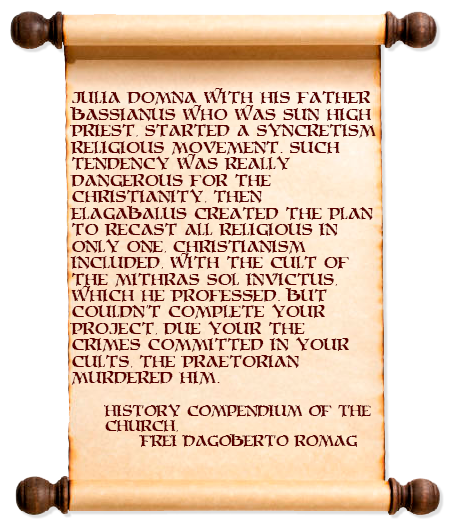
<style>
.page{position:relative;width:451px;height:526px;background:#ffffff}
.page>*{position:absolute;margin:0}
.t1{font:13.7px "MoriaCitadel";color:#580000}
.t2{font:12.5px "MoriaCitadel";color:#580000}
</style>
<div class="page">
<p class="t1" style="left:70px;top:88px;width:306px;height:297px">Julia Domna with his father<br>Bassianus who was Sun high<br>priest, started a syncretism<br>religious movement. Such<br>tendency was really<br>dangerous for the<br>christianity, then<br>Elagabalus created the plan<br>to recast all religious in<br>only one, christianism<br>included, with the cult of<br>the Mithras Sol Invictus,<br>which he professed. but<br>Couldn't complete your<br>project, due your the<br>crimes committed in your<br>cults, the praetorian<br>murdered him.</p>
<p class="t2" style="left:104px;top:404px;width:267px;height:43px">History Compendium of the<br>Church,<br> Frei Dagoberto Romag</p>
</div>
